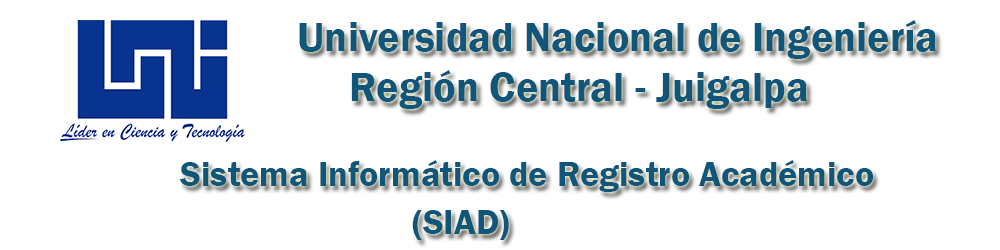
<style>
.page{position:relative;width:1000px;height:250px;background:#ffffff}
.page>*{position:absolute;margin:0}
.t1{font:42px "FranklinGothic-Demi";color:#0f567a}
.t2{font:36px "FranklinGothic-Demi";color:#0f567a}
</style>
<div class="page">
<p class="t1" style="left:299px;top:20px;width:637px;height:89px">Universidad Nacional de Ingeniería<br>     Región Central - Juigalpa</p>
<p class="t2" style="left:180px;top:160px;width:694px;height:32px">Sistema Informático de Registro Académico</p>
<p class="t2" style="left:412px;top:210px;width:97px;height:30px">(SIAD)</p>
</div>
